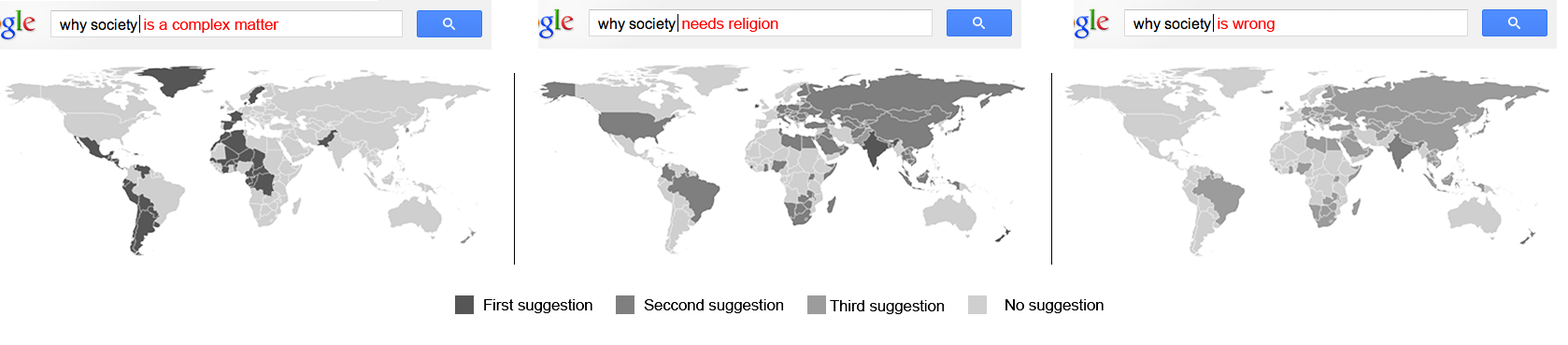
<style>
.page{position:relative;width:1568px;height:345px;background:#ffffff}
.page>*{position:absolute;margin:0}
.t1{font:15.6px "ArialMT";color:#ff0000}
.t2{font:15.6px "ArialMT";color:#000000}
</style>
<div class="page">
<p class="t1" style="left:682px;top:18px;width:96px;height:14px">needs religion</p>
<p class="t1" style="left:1218px;top:18px;width:57px;height:14px">is wrong</p>
<p class="t1" style="left:144px;top:19px;width:135px;height:14px">is a complex matter</p>
<p class="t2" style="left:484px;top:299px;width:108px;height:14px">First suggestion</p>
<p class="t2" style="left:644px;top:299px;width:140px;height:14px">Seccond suggestion</p>
<p class="t2" style="left:830px;top:300px;width:115px;height:14px">Third suggestion</p>
<p class="t2" style="left:1005px;top:299px;width:99px;height:14px">No suggestion</p>
</div>
